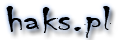
<style>
.page{position:relative;width:120px;height:40px;background:#ffffff}
.page>*{position:absolute;margin:0}
.t1{font:36px "Chiller-Regular";color:#010101;scale:1.5 1}
</style>
<div class="page">
<p class="t1" style="left:6px;top:6px;width:105px;height:32px">haks.pl</p>
</div>
